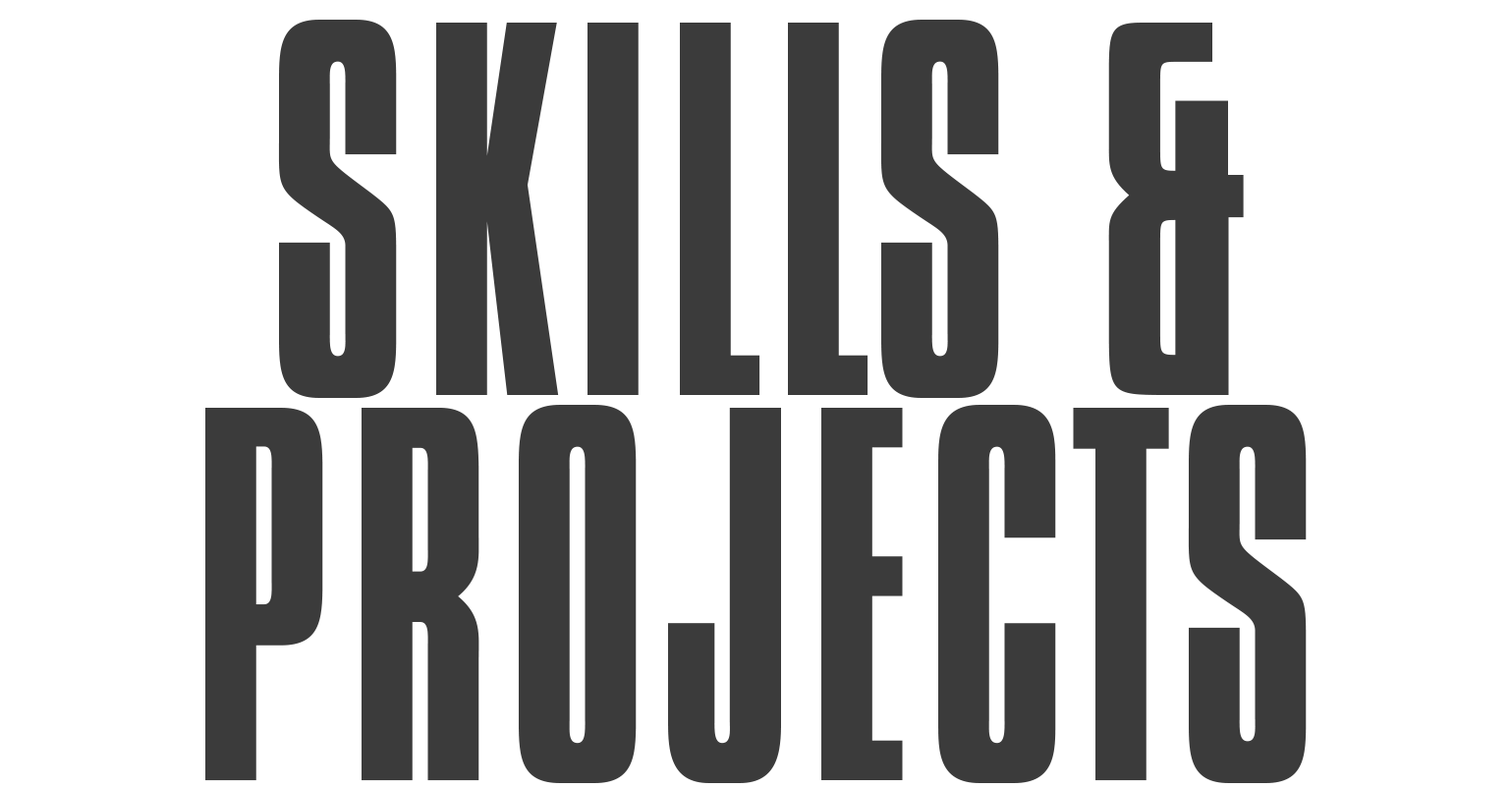
<style>
.page{position:relative;width:1511px;height:789px;background:#ffffff}
.page>*{position:absolute;margin:0}
.t1{font:450.4px/384.9px "OPTICompit-Light";color:#3b3b3b}
</style>
<div class="page">
<p class="t1" style="left:205px;top:20px;width:1102px;height:763px;text-align:center">SKILLS &amp;<br>PROJECTS</p>
</div>
